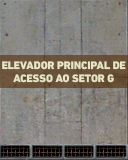
<style>
.page{position:relative;width:128px;height:160px}
.page>*{position:absolute;margin:0}
.t1{font:11px/13px "DINNextLTPro-Heavy";color:#e7e7c6;text-transform:uppercase}
</style>
<div class="page">
<p class="t1" style="left:2px;top:61px;width:124px;height:22px;text-align:center">ELEVADOR PRINCIPAL DE<br>ACESSO ao setor g</p>
</div>
